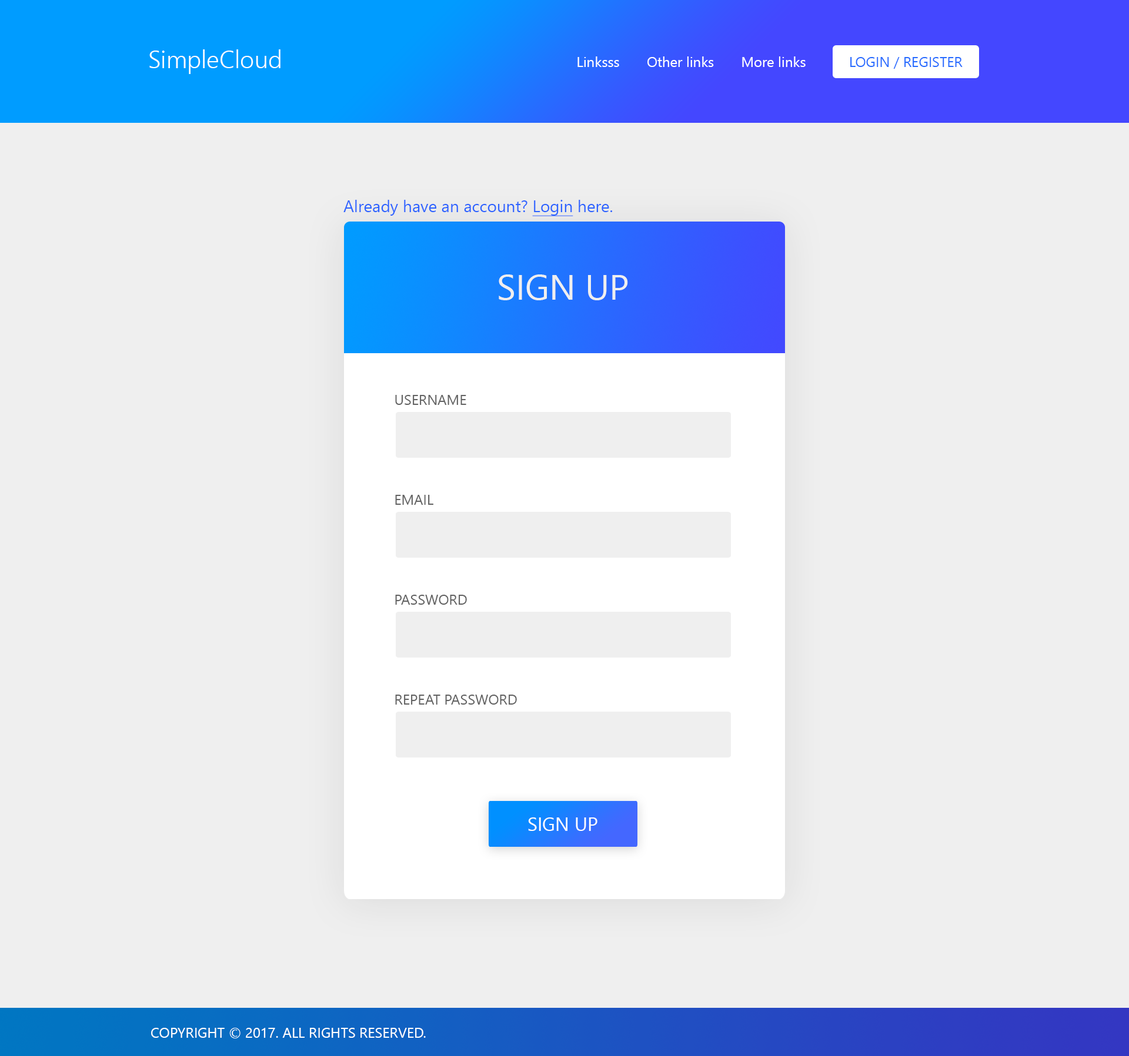
<style>
.page{position:relative;width:1129px;height:1056px;background:#efefef}
.page>*{position:absolute;margin:0}
.t1{font:24.7px "NirmalaUI-Semilight";color:#ffffff}
.t2{font:14.1px "NirmalaUI";color:#ffffff}
.t3{font:14.1px "NirmalaUI";color:#276cff}
.t4{font:16.5px "NirmalaUI";color:#2d63ff}
.t5{font:16.5px "NirmalaUI";color:#2d63ff;text-decoration:underline}
.t6{font:35.3px "NirmalaUI";color:#efefef}
.t7{font:14.1px "NirmalaUI";color:#626262}
.t8{font:18.8px "NirmalaUI";color:#ffffff}
</style>
<div class="page">
<p class="t1" style="left:149px;top:49px;width:131px;height:25px">SimpleCloud</p>
<p class="t2" style="left:577px;top:56px;width:228px;height:11px">Linksss       Other links       More links</p>
<p class="t3" style="left:850px;top:57px;width:112px;height:12px">LOGIN / REGISTER</p>
<p class="t4" style="left:343px;top:200px;width:270px;height:16px">Already have an account? <span class="t5">Login</span> here.</p>
<p class="t6" style="left:499px;top:275px;width:129px;height:25px">SIGN UP</p>
<p class="t7" style="left:395px;top:395px;width:71px;height:10px">USERNAME</p>
<p class="t7" style="left:395px;top:495px;width:38px;height:10px">EMAIL</p>
<p class="t7" style="left:395px;top:595px;width:72px;height:10px">PASSWORD</p>
<p class="t7" style="left:395px;top:695px;width:122px;height:10px">REPEAT PASSWORD</p>
<p class="t8" style="left:528px;top:818px;width:69px;height:13px">SIGN UP</p>
<p class="t2" style="left:151px;top:1028px;width:275px;height:11px">COPYRIGHT © 2017. ALL RIGHTS RESERVED.</p>
</div>
